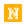
<style>
.page{position:relative;width:25px;height:25px;background:#ffffff}
.page>*{position:absolute;margin:0}
.t1{font:16px "ChrluenEG-Medium-GB";color:#ffffff;font-weight:bold}
</style>
<div class="page">
<p class="t1" style="left:7px;top:7px;width:12px;height:13px">N</p>
</div>
